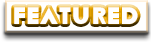
<style>
.page{position:relative;width:151px;height:43px;background:#ffffff}
.page>*{position:absolute;margin:0}
.t1{font:24px "Viafont";color:#ffffff}
</style>
<div class="page">
<p class="t1" style="left:14px;top:7px;width:124px;height:17px">Featured</p>
</div>
